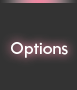
<style>
.page{position:relative;width:77px;height:90px;background:#333333}
.page>*{position:absolute;margin:0}
.t1{font:16px "HKExplorerSharp-Regular";letter-spacing:-0.015em;color:#ffffff}
</style>
<div class="page">
<p class="t1" style="left:11px;top:42px;width:57px;height:16px">Options</p>
</div>
